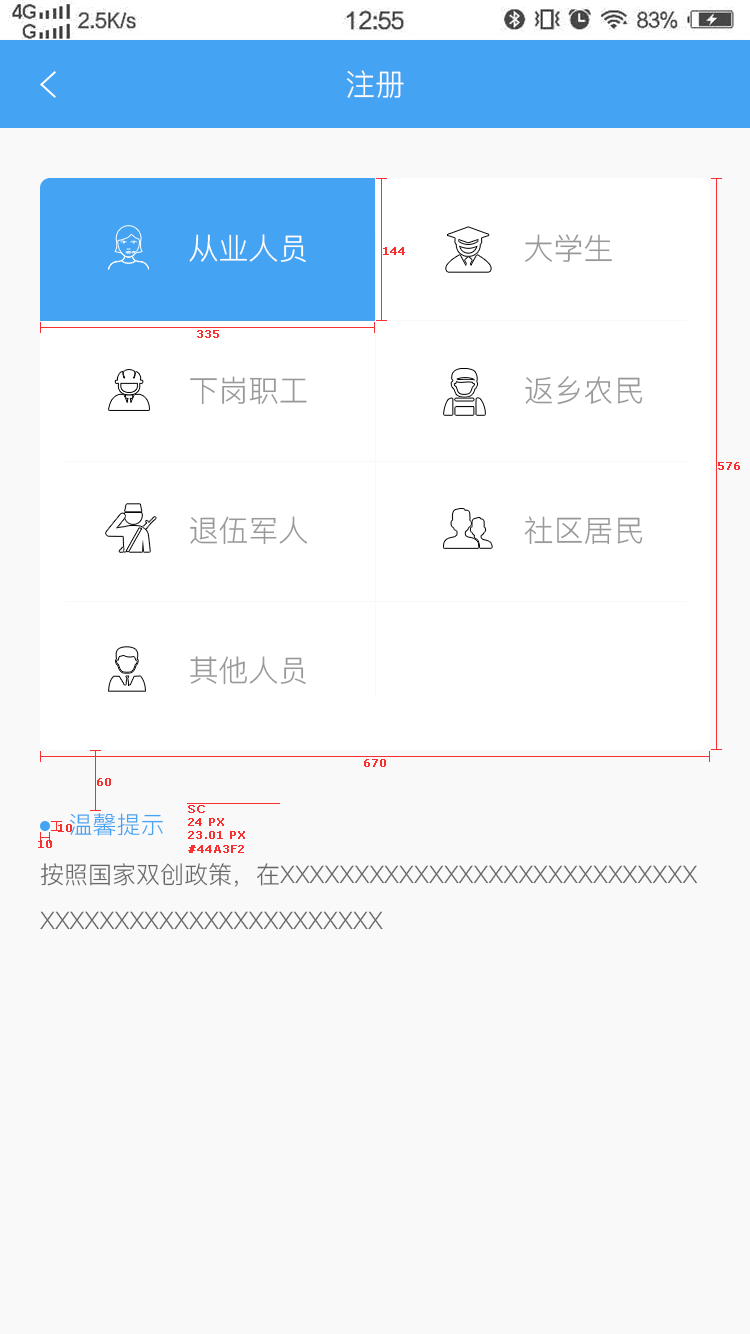
<style>
.page{position:relative;width:750px;height:1334px;background:#f9f9f9}
.page>*{position:absolute;margin:0}
.t1{font:30px "PingFang-SC-Regular";color:#ffffff;text-transform:uppercase}
.t2{font:30px "PingFang-SC-Regular";color:#fefefe;text-transform:uppercase}
.t3{font:30px "PingFang-SC-Regular";color:#999999;text-transform:uppercase}
.t4{font:11px "Verdana";color:#f83030;font-weight:bold}
.t5{font:24px "PingFang-SC-Regular";color:#44a3f2;text-transform:uppercase}
.t6{font:24px/23px "PingFang-SC-Regular";color:#666666;text-transform:uppercase}
</style>
<div class="page">
<p class="t1" style="left:346px;top:70px;width:58px;height:28px">注册</p>
<p class="t2" style="left:189px;top:234px;width:117px;height:28px">从业人员</p>
<p class="t3" style="left:524px;top:234px;width:88px;height:28px">大学生</p>
<p class="t4" style="left:383px;top:247px;width:22px;height:8px">144</p>
<p class="t4" style="left:197px;top:330px;width:22px;height:8px">335</p>
<p class="t3" style="left:190px;top:376px;width:117px;height:29px">下岗职工</p>
<p class="t3" style="left:525px;top:376px;width:118px;height:29px">返乡农民</p>
<p class="t4" style="left:718px;top:462px;width:22px;height:8px">576</p>
<p class="t3" style="left:190px;top:516px;width:118px;height:29px">退伍军人</p>
<p class="t3" style="left:524px;top:516px;width:119px;height:29px">社区居民</p>
<p class="t3" style="left:190px;top:656px;width:116px;height:29px">其他人员</p>
<p class="t4" style="left:364px;top:759px;width:22px;height:8px">670</p>
<p class="t4" style="left:97px;top:778px;width:14px;height:8px">60</p>
<p class="t4" style="left:188px;top:805px;width:57px;height:48px">SC<br>24 PX<br>23.01 PX<br>#44A3F2</p>
<p class="t5" style="left:70px;top:813px;width:93px;height:23px">温馨提示</p>
<p class="t4" style="left:58px;top:824px;width:14px;height:8px">10</p>
<p class="t4" style="left:38px;top:840px;width:14px;height:8px">10</p>
<p class="t6" style="left:40px;top:863px;width:658px;height:67px">按照国家双创政策，在XXXXXXXXXXXXXXXXXXXXXXXXXXXX<br><br>XXXXXXXXXXXXXXXXXXXXXXX</p>
</div>
